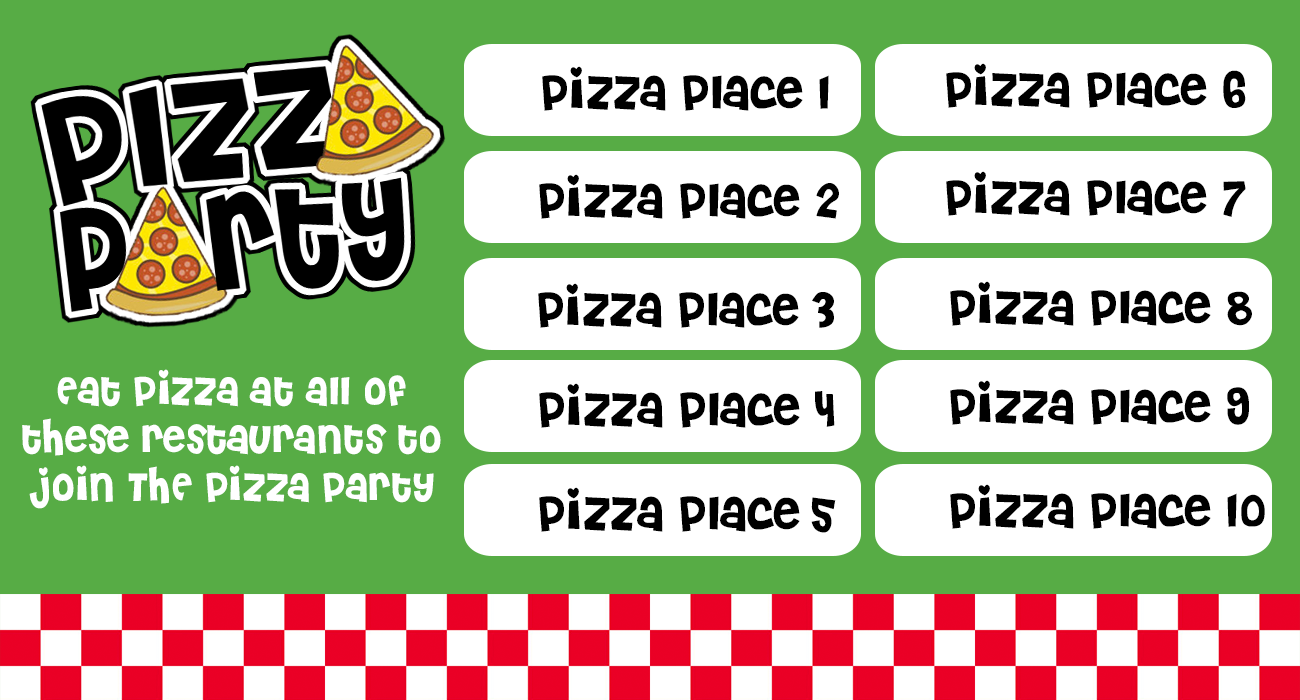
<style>
.page{position:relative;width:1300px;height:700px;background:#ffffff}
.page>*{position:absolute;margin:0}
.t1{font:48px "Cheri";color:#000000}
.t2{font:40px "Cheri";color:#ffffff}
</style>
<div class="page">
<p class="t1" style="left:946px;top:63px;width:300px;height:45px">pizza place 6</p>
<p class="t1" style="left:542px;top:66px;width:287px;height:45px">pizza place 1</p>
<p class="t1" style="left:539px;top:174px;width:300px;height:45px">pizza place 2</p>
<p class="t1" style="left:946px;top:171px;width:300px;height:46px">pizza place 7</p>
<p class="t1" style="left:950px;top:281px;width:302px;height:45px">pizza place 8</p>
<p class="t1" style="left:538px;top:283px;width:296px;height:45px">pizza place 3</p>
<p class="t2" style="left:22px;top:369px;width:419px;height:140px;text-align:center">Eat pizza at all of these restaurants to join THE pizza party</p>
<p class="t1" style="left:539px;top:383px;width:296px;height:45px">pizza place 4</p>
<p class="t1" style="left:950px;top:380px;width:299px;height:45px">pizza place 9</p>
<p class="t1" style="left:950px;top:484px;width:315px;height:45px">pizza place 10</p>
<p class="t1" style="left:539px;top:487px;width:297px;height:46px">pizza place 5</p>
</div>
